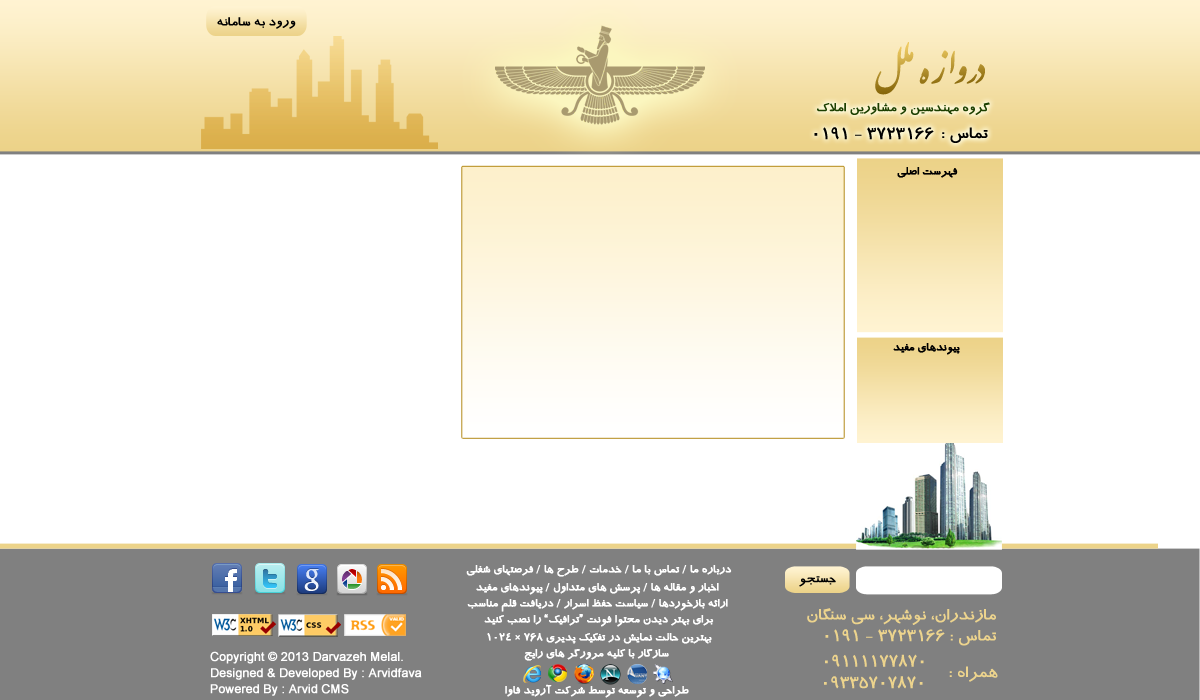
<style>
.page{position:relative;width:1200px;height:700px;background:#ffffff}
.page>*{position:absolute;margin:0}
.t1{font:14px "BTraffic";color:#000000;font-weight:bold}
.t2{font:60px "01-IranNastaliq";font-weight:bold}
.t3{font:14px "BTraffic";color:#1c3f00;font-weight:bold}
.t4{font:18px "BTraffic";color:#000000;font-weight:bold}
.t5{font:12px "BTraffic";color:#000000;font-weight:bold}
.t6{font:12px "BTraffic";color:#ffffff;font-weight:bold}
.t7{font:18px "BTraffic";color:#edd48d;font-weight:bold}
.t8{font:12px "ArialMT";color:#ffffff;font-weight:bold}
</style>
<div class="page">
<p class="t1" style="left:217px;top:17px;width:79px;height:12px">ورود به سامانه</p>
<p class="t2" style="left:875px;top:42px;width:110px;height:53px">دروازه ملل</p>
<p class="t3" style="left:817px;top:102px;width:173px;height:13px">گروه مهندسین و مشاورین املاک</p>
<p class="t4" style="left:814px;top:127px;width:120px;height:13px">3723166 - 0191</p>
<p class="t4" style="left:942px;top:127px;width:46px;height:16px">تماس :</p>
<p class="t5" style="left:897px;top:167px;width:61px;height:11px">فهرست اصلی</p>
<p class="t5" style="left:893px;top:343px;width:67px;height:12px">پیوندهای مفید</p>
<p class="t6" style="left:466px;top:565px;width:266px;height:12px">درباره ما / تماس با ما / خدمات / طرح ها / فرصتهای شغلی</p>
<p class="t1" style="left:799px;top:576px;width:37px;height:11px">جستجو</p>
<p class="t6" style="left:476px;top:583px;width:243px;height:12px">اخبار و مقاله ها / پرسش های متداول / پیوندهای مفید</p>
<p class="t6" style="left:467px;top:599px;width:261px;height:13px">ارائه بازخوردها / سیاست حفظ اسرار / دریافت قلم مناسب</p>
<p class="t6" style="left:484px;top:614px;width:230px;height:13px">برای بهتر دیدن محتوا فونت “ترافیک” را نصب کنید</p>
<p class="t7" style="left:807px;top:608px;width:189px;height:17px">مازندران، نوشهر، سی سنگان</p>
<p class="t7" style="left:825px;top:629px;width:171px;height:17px">تماس : 3723166 - 0191</p>
<p class="t6" style="left:487px;top:633px;width:225px;height:11px">بهترین حالت نمایش در تفکیک پدیری 768 × 1024</p>
<p class="t8" style="left:210px;top:651px;width:193px;height:13px">.Copyright © 2013 Darvazeh Melal</p>
<p class="t6" style="left:524px;top:649px;width:145px;height:12px">سازگار با کلیه مرورگر های رایج</p>
<p class="t7" style="left:825px;top:654px;width:99px;height:13px">09111177870</p>
<p class="t8" style="left:211px;top:668px;width:211px;height:12px">Designed &amp; Developed By : Arvidfava</p>
<p class="t7" style="left:824px;top:676px;width:99px;height:13px">09335707870</p>
<p class="t7" style="left:949px;top:666px;width:49px;height:16px">همراه :</p>
<p class="t8" style="left:210px;top:684px;width:139px;height:12px">Powered By : Arvid CMS</p>
<p class="t6" style="left:505px;top:684px;width:184px;height:14px">طراحی و توسعه توسط شرکت آروید فاوا</p>
</div>
